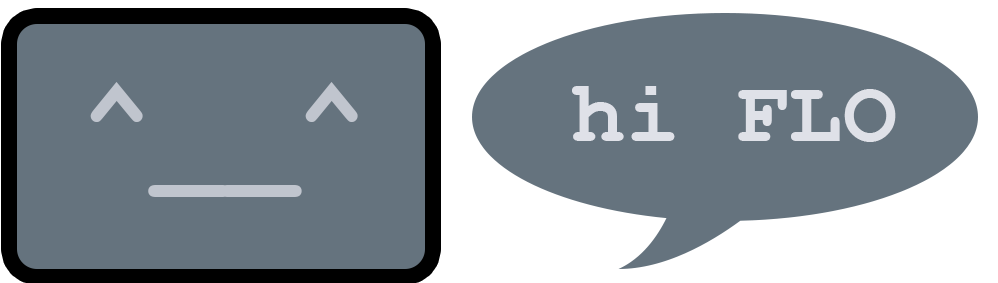
<style>
.page{position:relative;width:998px;height:283px;background:#65737e}
.page>*{position:absolute;margin:0}
.t1{font:119.4px "CourierNewPS-BoldMT";color:#c0c5ce}
.t2{font:90.4px "CourierNewPS-BoldMT";color:#dfe1e8}
</style>
<div class="page">
<p class="t1" style="left:90px;top:82px;width:268px;height:115px">^__^</p>
<p class="t2" style="left:572px;top:86px;width:324px;height:56px">hi FLO</p>
</div>
